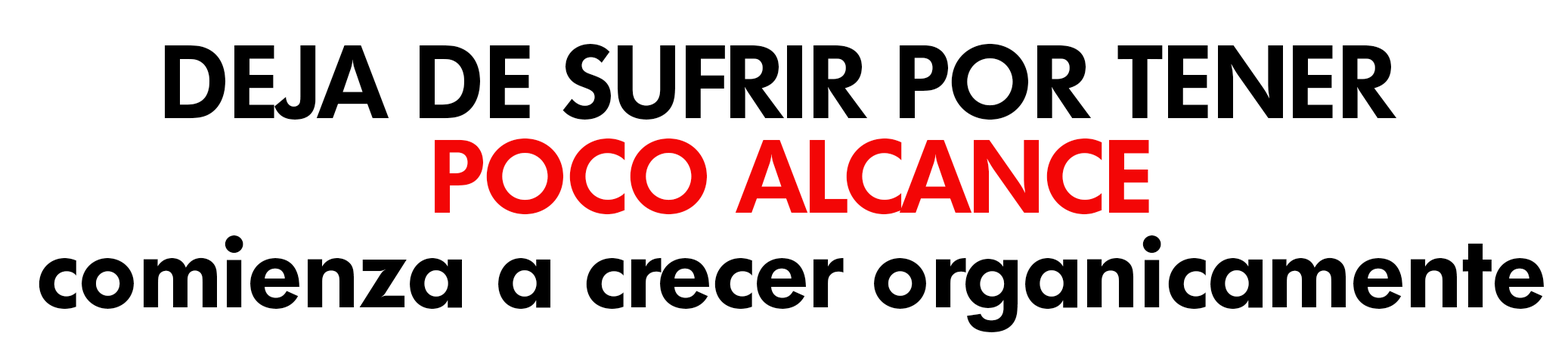
<style>
.page{position:relative;width:1568px;height:358px;background:#ffffff}
.page>*{position:absolute;margin:0}
.t1{font:100.6px/94.4px "Limerick-DemiBold";letter-spacing:0.004em;color:#000000}
.t2{font:100.6px/94.4px "Limerick-DemiBold";letter-spacing:0.004em;color:#f30606}
</style>
<div class="page">
<p class="t1" style="left:39px;top:43px;width:1505px;height:289px;text-align:center">DEJA DE SUFRIR POR TENER <br><span class="t2">POCO ALCANCE<br></span>comienza a crecer organicamente</p>
</div>
